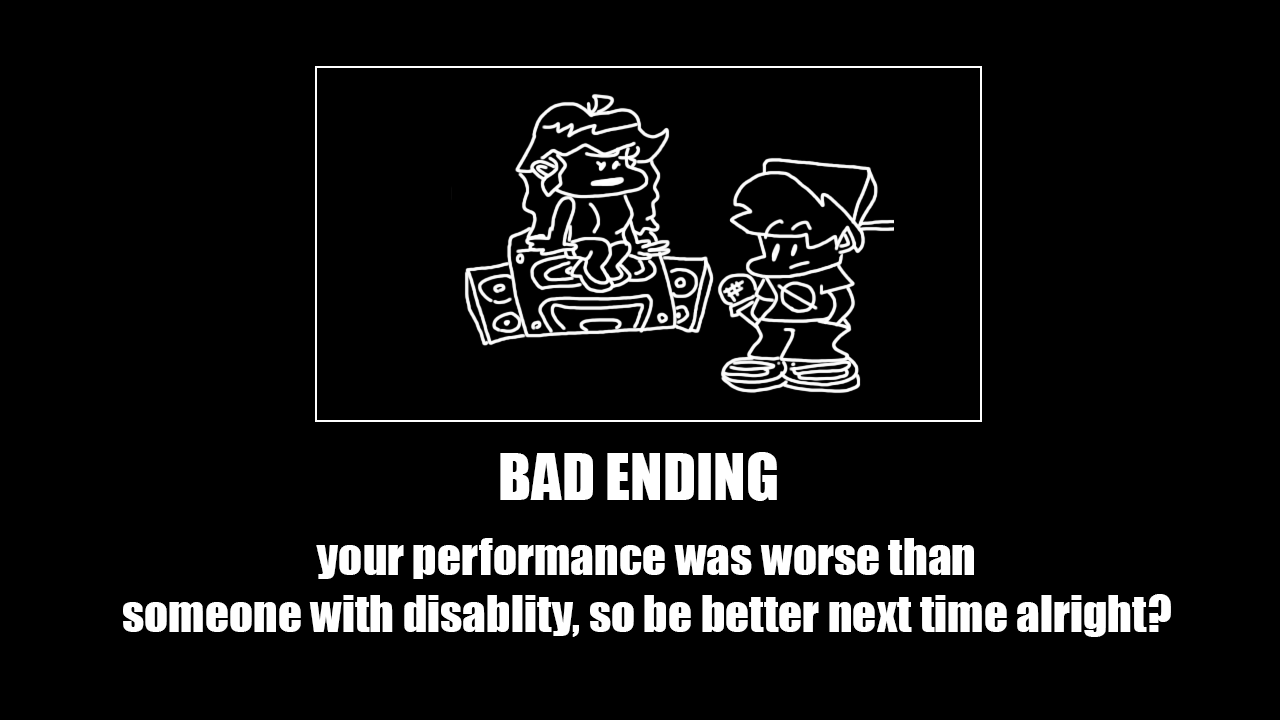
<style>
.page{position:relative;width:1280px;height:720px;background:#000000}
.page>*{position:absolute;margin:0}
.t1{font:60px "Impact";color:#ffffff}
.t2{font:47.3px "Impact";color:#ffffff}
</style>
<div class="page">
<p class="t1" style="left:500px;top:452px;width:277px;height:49px">BAD ENDING</p>
<p class="t2" style="left:123px;top:538px;width:1048px;height:99px;text-align:center">your performance was worse than<br>someone with disablity, so be better next time alright?</p>
</div>
